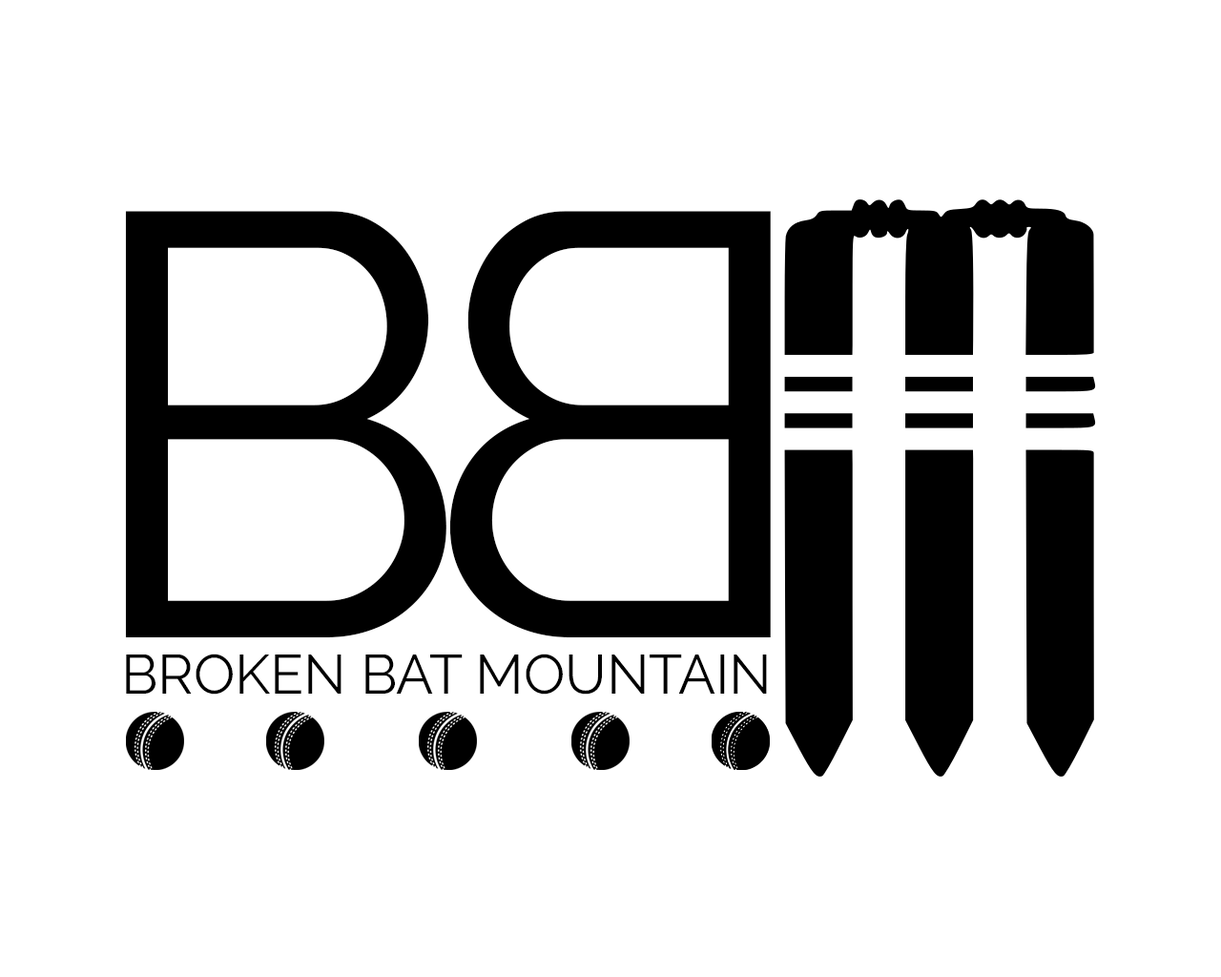
<style>
.page{position:relative;width:1221px;height:977px;background:#ffffff}
.page>*{position:absolute;margin:0}
.t1{font:600.2px "Raleway-Regular";color:#000000}
.t2{font:55px "Raleway-Regular";color:#000000}
</style>
<div class="page">
<p class="t1" style="left:125px;top:211px;width:321px;height:426px">B</p>
<p class="t1" style="left:449px;top:211px;width:322px;height:426px;rotate:180deg">B</p>
<p class="t2" style="left:126px;top:653px;width:641px;height:41px">BROKEN BAT MOUNTAIN</p>
</div>
